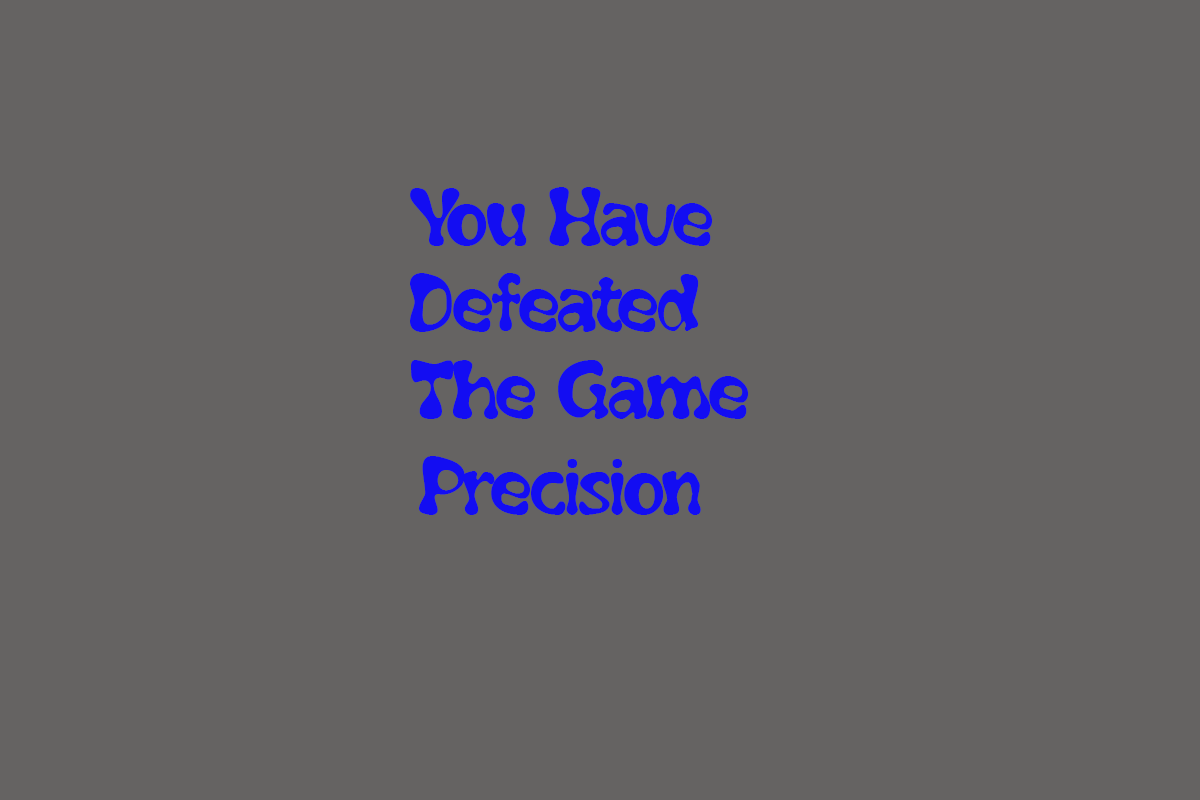
<style>
.page{position:relative;width:1200px;height:800px;background:#656362}
.page>*{position:absolute;margin:0}
.t1{font:72px "Flubber";color:#130df2}
</style>
<div class="page">
<p class="t1" style="left:410px;top:187px;width:339px;height:232px">You Have Defeated   The Game</p>
<p class="t1" style="left:419px;top:456px;width:282px;height:59px">Precision</p>
</div>
